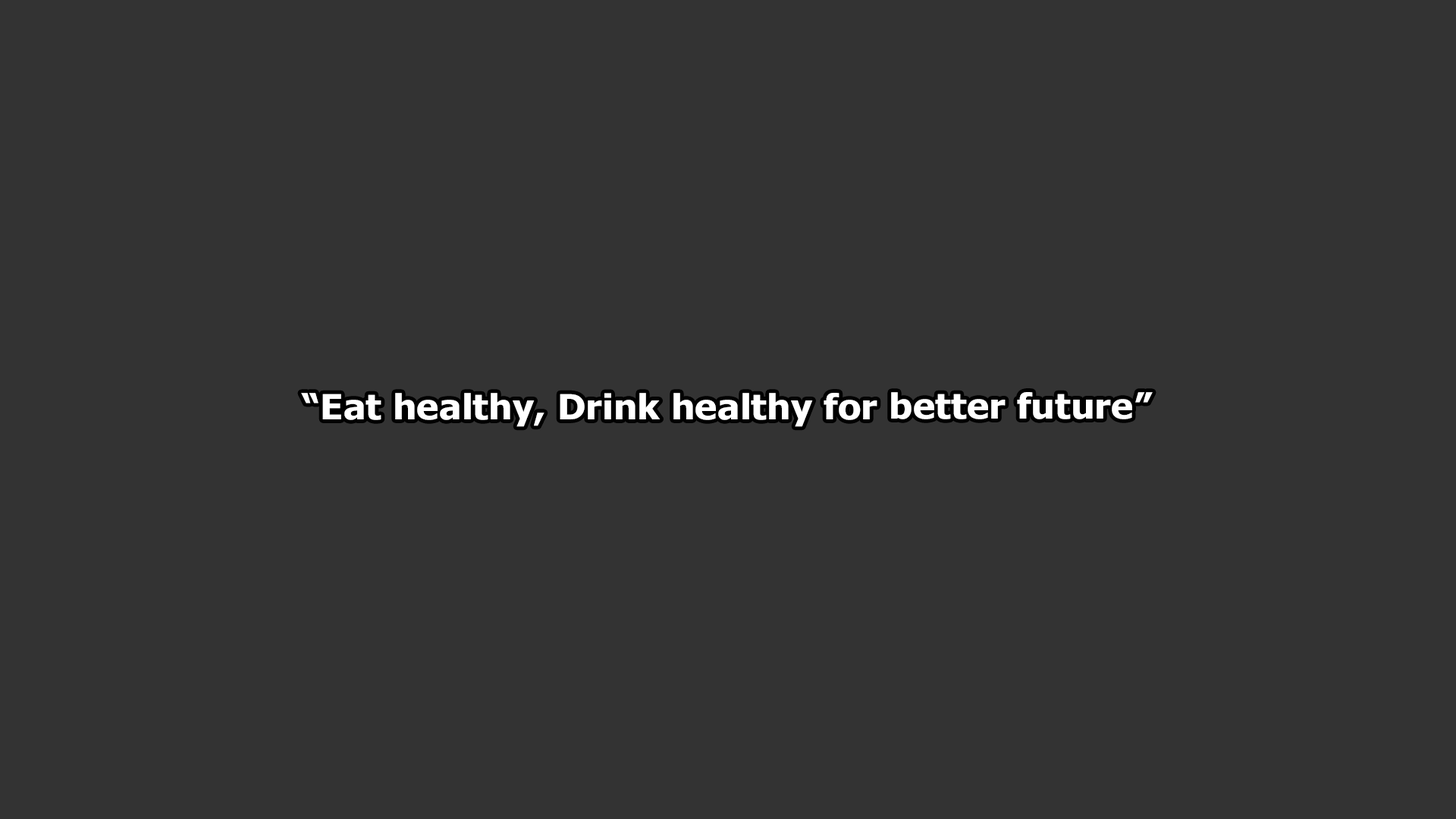
<style>
.page{position:relative;width:1456px;height:819px;background:#333333}
.page>*{position:absolute;margin:0}
.t1{font:34.6px "Tahoma-Bold";color:#ffffff;scale:1.08 1}
</style>
<div class="page">
<p class="t1" style="left:301px;top:392px;width:852px;height:35px">“Eat healthy, Drink healthy for better future”</p>
</div>
